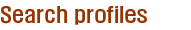
<style>
.page{position:relative;width:191px;height:30px;background:#ffffff}
.page>*{position:absolute;margin:0}
.t1{font:20px "HYKHeadLineStd-Medium";color:#993300}
</style>
<div class="page">
<p class="t1" style="left:1px;top:6px;width:146px;height:19px">Search profiles</p>
</div>
